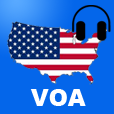
<style>
.page{position:relative;width:114px;height:114px;background:#0466ea}
.page>*{position:absolute;margin:0}
.t1{font:23px "Arial-Black";color:#ffffff}
</style>
<div class="page">
<p class="t1" style="left:30px;top:89px;width:56px;height:17px">VOA</p>
</div>
